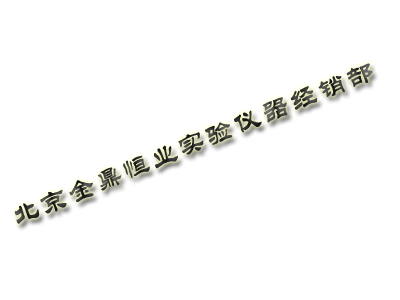
<style>
.page{position:relative;width:400px;height:300px;background:#ffffff}
.page>*{position:absolute;margin:0}
.t1{font:48px "STLiti";letter-spacing:0.2em;text-transform:uppercase}
</style>
<div class="page">
<p class="t1" style="left:14px;top:63px;width:359px;height:161px;rotate:-22deg">北京金鼎恒业实验仪器经销部</p>
</div>
